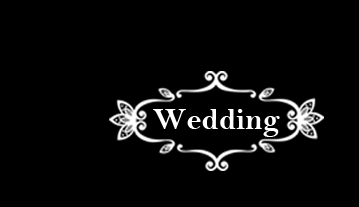
<style>
.page{position:relative;width:359px;height:207px;background:#000000}
.page>*{position:absolute;margin:0}
.t1{font:31.4px "BellMTBold";color:#ffffff}
</style>
<div class="page">
<p class="t1" style="left:153px;top:109px;width:127px;height:28px">Wedding</p>
</div>
